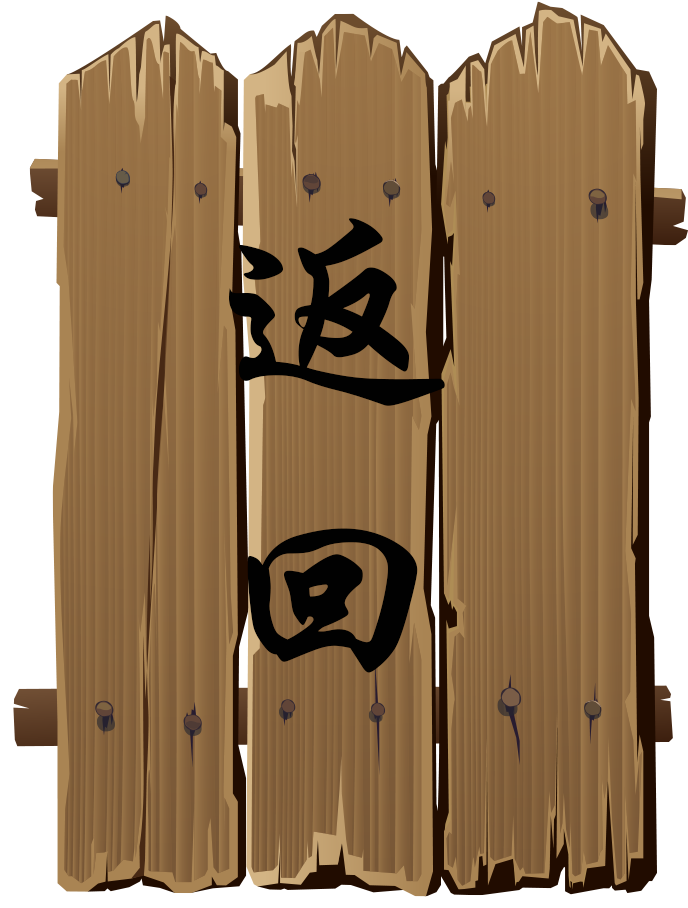
<style>
.page{position:relative;width:688px;height:908px}
.page>*{position:absolute;margin:0}
.t1{font:250px/57.2px "STXingkai";color:#010101}
</style>
<div class="page">
<p class="t1" style="left:229px;top:218px;width:216px;height:455px;text-align:center">返<br><br><br><br><br>回</p>
</div>
